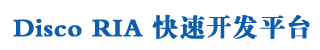
<style>
.page{position:relative;width:320px;height:50px;background:#ffffff}
.page>*{position:absolute;margin:0}
.t1{font:26px "FZDBSJW--GB1-0";color:#0e5dac;font-weight:bold}
</style>
<div class="page">
<p class="t1" style="left:13px;top:14px;width:297px;height:25px">Disco RIA 快速开发平台</p>
</div>
